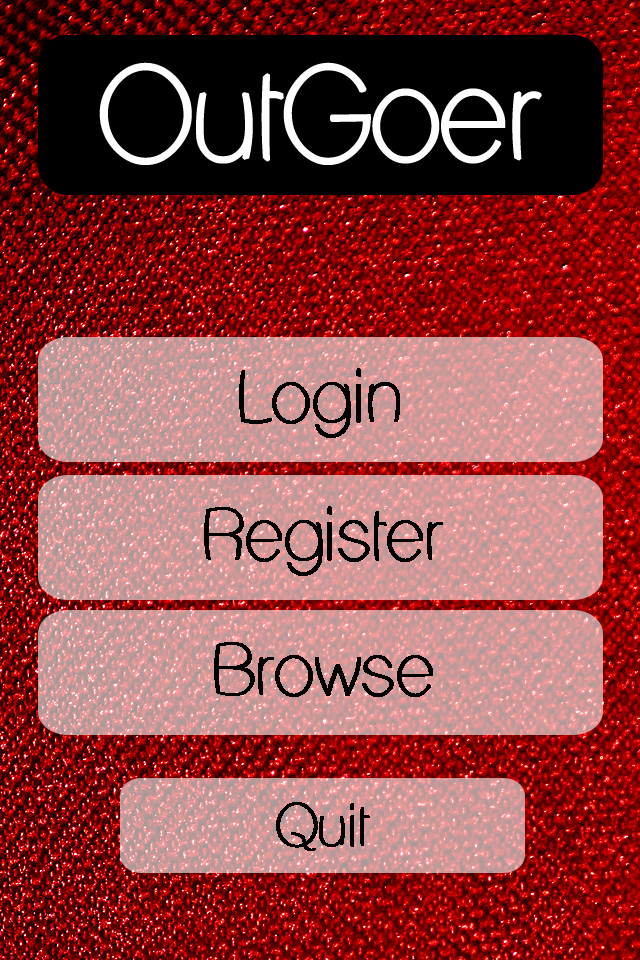
<style>
.page{position:relative;width:640px;height:960px}
.page>*{position:absolute;margin:0}
.t1{font:68.2px "LaneHumouresque";color:#000000;font-weight:bold}
.t2{font:54.2px "LaneHumouresque";color:#000000;font-weight:bold}
</style>
<div class="page">
<p class="t1" style="left:239px;top:368px;width:161px;height:70px">Login</p>
<p class="t1" style="left:204px;top:506px;width:239px;height:70px">Register</p>
<p class="t1" style="left:214px;top:642px;width:219px;height:55px">Browse</p>
<p class="t2" style="left:276px;top:802px;width:94px;height:49px">Quit</p>
</div>
